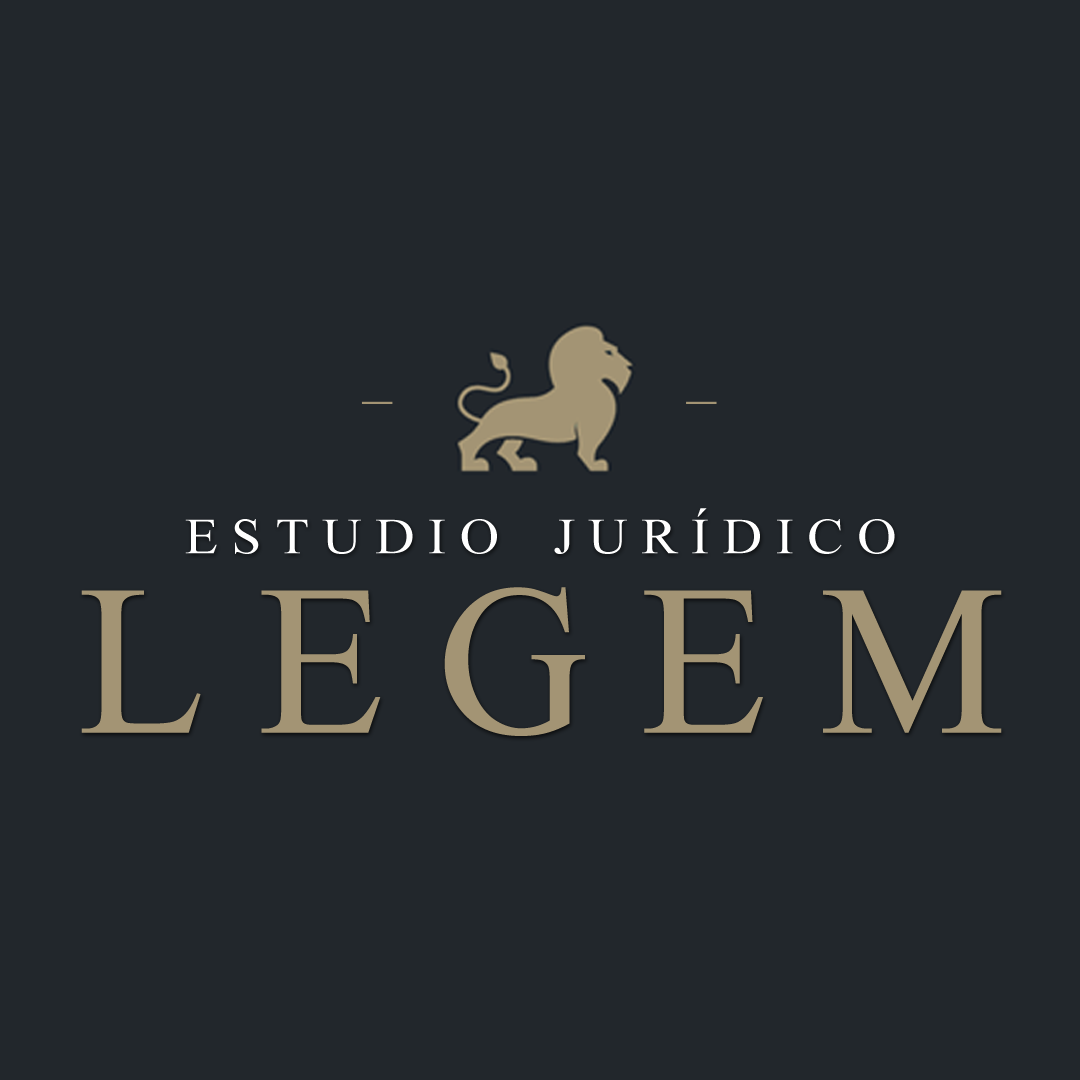
<style>
.page{position:relative;width:1080px;height:1080px;background:#22272c}
.page>*{position:absolute;margin:0}
.t1{font:50.4px "TimesNewRomanPSMT";color:#ffffff;scale:1.08 1}
.t2{font:214.6px "TimesNewRomanPSMT";color:#a39474}
</style>
<div class="page">
<p class="t1" style="left:185px;top:508px;width:710px;height:46px">E S T U D I O    J U R Í D I C O</p>
<p class="t2" style="left:81px;top:587px;width:921px;height:149px">L E G E M</p>
</div>
